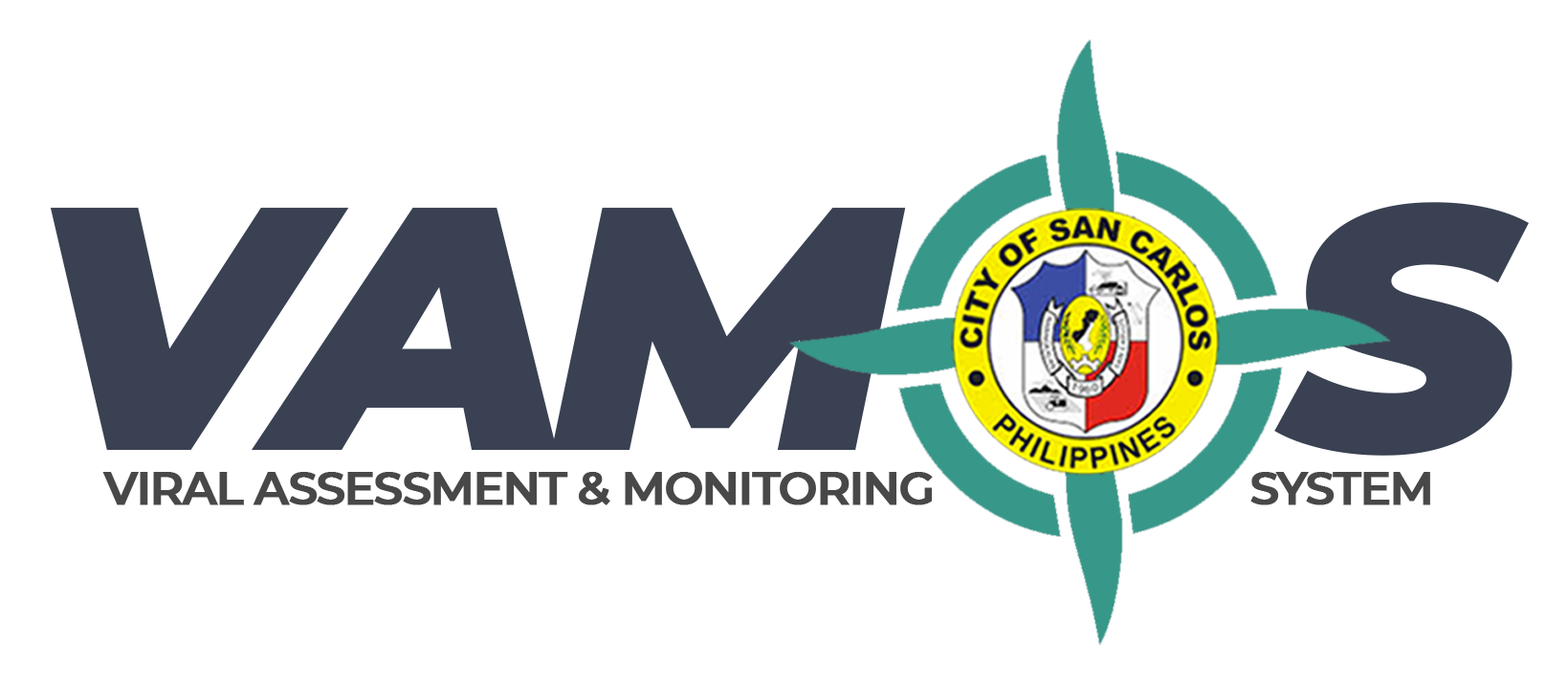
<style>
.page{position:relative;width:1568px;height:693px;background:#ffffff}
.page>*{position:absolute;margin:0}
.t1{font:345.6px "Montserrat-BlackItalic";letter-spacing:-0.05em;color:#484848;scale:1.05 1}
.t2{font:46.2px "Montserrat-SemiBold";letter-spacing:-0.05em;color:#484848;font-weight:bold}
</style>
<div class="page">
<p class="t1" style="left:50px;top:202px;width:1479px;height:253px">VAM     S</p>
<p class="t2" style="left:102px;top:472px;width:1328px;height:33px">VIRAL ASSESSMENT &amp; MONITORING                           SYSTEM</p>
</div>
